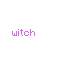
<style>
.page{position:relative;width:64px;height:64px;background:#ffffff}
.page>*{position:absolute;margin:0}
.t1{font:8px "Minecraft";color:#dc65ee}
</style>
<div class="page">
<p class="t1" style="left:12px;top:29px;width:23px;height:7px">witch</p>
</div>
